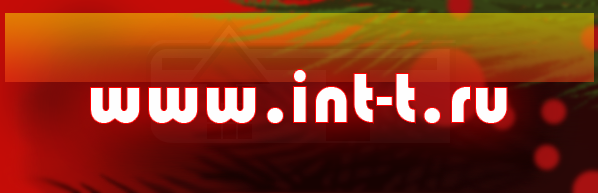
<style>
.page{position:relative;width:598px;height:193px}
.page>*{position:absolute;margin:0}
.t1{font:75px "Bauhaus93";color:#fefefe}
</style>
<div class="page">
<p class="t1" style="left:90px;top:69px;width:418px;height:55px">www.int-t.ru</p>
</div>
